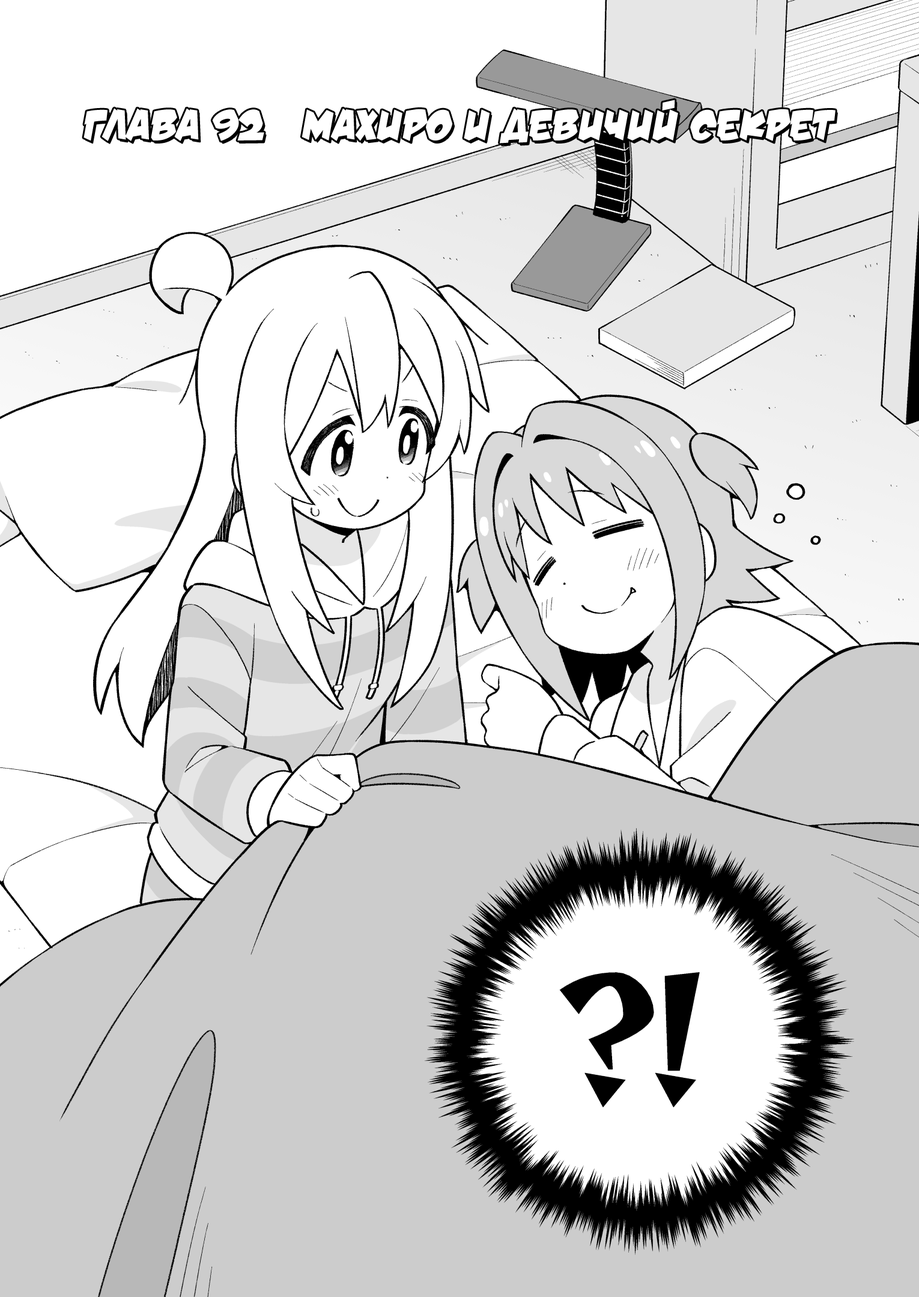
<style>
.page{position:relative;width:919px;height:1297px;background:#ffffff}
.page>*{position:absolute;margin:0}
.t1{font:43.2px "v_DamnNoisyKids";color:#ffffff;text-transform:uppercase}
</style>
<div class="page">
<p class="t1" style="left:83px;top:100px;width:753px;height:44px">Глава 92   Махиро и девичий секрет</p>
</div>
